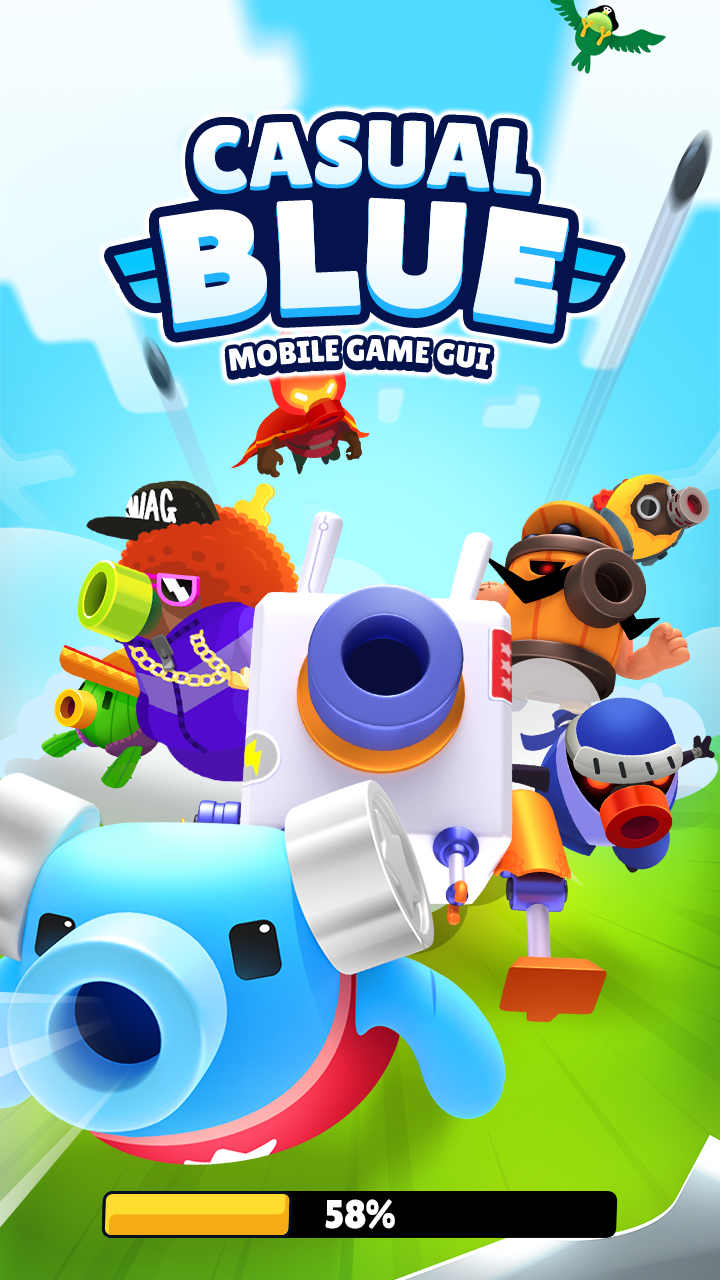
<style>
.page{position:relative;width:720px;height:1280px}
.page>*{position:absolute;margin:0}
.t1{font:90px "LilitaOne";color:#f1fbff;text-transform:uppercase;scale:1.11 1}
.t2{font:90px "LilitaOne";color:#f2fbff;text-transform:uppercase;scale:1.11 1}
.t3{font:90px "LilitaOne";color:#f3fcff;text-transform:uppercase;scale:1.11 1}
.t4{font:90px "LilitaOne";color:#f4fcff;text-transform:uppercase;scale:1.11 1}
.t5{font:90px "LilitaOne";color:#f5fcff;text-transform:uppercase;scale:1.11 1}
.t6{font:90px "LilitaOne";color:#ffffff;text-transform:uppercase;scale:1.11 1}
.t7{font:160px "Belanosima-Bold";letter-spacing:-0.03em;color:#ffffff;text-transform:uppercase}
.t8{font:160px "Belanosima-Bold";letter-spacing:-0.03em;color:#f0fbff;text-transform:uppercase}
.t9{font:160px "Belanosima-Bold";letter-spacing:-0.03em;color:#f1fbff;text-transform:uppercase}
.t10{font:160px "Belanosima-Bold";letter-spacing:-0.03em;color:#f2fbff;text-transform:uppercase}
.t11{font:160px "Belanosima-Bold";letter-spacing:-0.03em;color:#f3fcff;text-transform:uppercase}
.t12{font:160px "Belanosima-Bold";letter-spacing:-0.03em;color:#f4fcff;text-transform:uppercase}
.t13{font:31.3px "LilitaOne";color:#ffffff;text-transform:uppercase}
.t14{font:40px "LilitaOne";color:#ffffff}
</style>
<div class="page">
<p class="t1" style="left:193px;top:123px;width:340px;height:73px">Casual</p>
<p class="t2" style="left:193px;top:122px;width:340px;height:73px">Casual</p>
<p class="t3" style="left:193px;top:121px;width:340px;height:73px">Casual</p>
<p class="t4" style="left:193px;top:120px;width:340px;height:73px">Casual</p>
<p class="t5" style="left:193px;top:119px;width:340px;height:73px">Casual</p>
<p class="t6" style="left:193px;top:119px;width:340px;height:73px">Casual</p>
<p class="t7" style="left:159px;top:197px;width:410px;height:128px">Blue</p>
<p class="t8" style="left:159px;top:207px;width:410px;height:127px">Blue</p>
<p class="t9" style="left:159px;top:206px;width:410px;height:127px">Blue</p>
<p class="t10" style="left:159px;top:205px;width:410px;height:127px">Blue</p>
<p class="t10" style="left:159px;top:204px;width:410px;height:127px">Blue</p>
<p class="t11" style="left:159px;top:203px;width:410px;height:127px">Blue</p>
<p class="t11" style="left:159px;top:202px;width:410px;height:127px">Blue</p>
<p class="t12" style="left:159px;top:201px;width:410px;height:127px">Blue</p>
<p class="t12" style="left:159px;top:200px;width:410px;height:127px">Blue</p>
<p class="t13" style="left:228px;top:338px;width:263px;height:33px">Mobile Game Gui</p>
<p class="t14" style="left:325px;top:1199px;width:70px;height:30px">58%</p>
</div>
